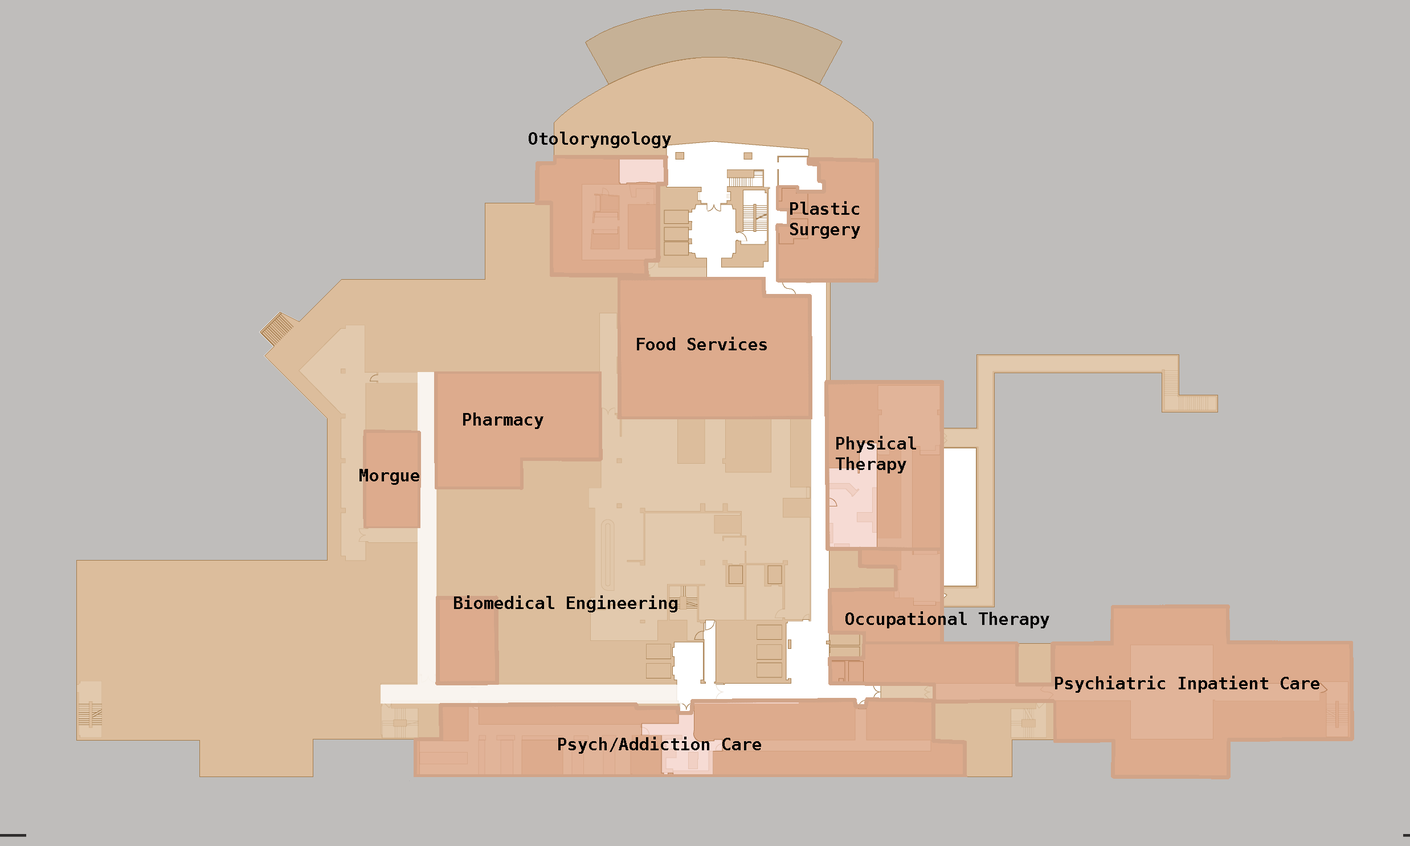
<style>
.page{position:relative;width:1410px;height:846px;background:#bfbdbb}
.page>*{position:absolute;margin:0}
.t1{font:17.1px "Menlo-Bold";color:#000000}
.t2{font:17.1px "Menlo-Bold";color:#080808}
</style>
<div class="page">
<p class="t1" style="left:529px;top:132px;width:142px;height:16px">Otoloryngology</p>
<p class="t1" style="left:790px;top:201px;width:70px;height:38px">Plastic <br>Surgery</p>
<p class="t2" style="left:637px;top:337px;width:130px;height:13px">Food Services</p>
<p class="t1" style="left:463px;top:412px;width:80px;height:17px">Pharmacy</p>
<p class="t2" style="left:836px;top:436px;width:80px;height:37px">Physical <br>Therapy</p>
<p class="t1" style="left:359px;top:469px;width:60px;height:16px">Morgue</p>
<p class="t1" style="left:454px;top:595px;width:223px;height:17px">Biomedical Engineering</p>
<p class="t1" style="left:845px;top:611px;width:204px;height:17px">Occupational Therapy</p>
<p class="t1" style="left:1055px;top:676px;width:264px;height:17px">Psychiatric Inpatient Care</p>
<p class="t1" style="left:558px;top:736px;width:203px;height:18px">Psych/Addiction Care</p>
</div>
